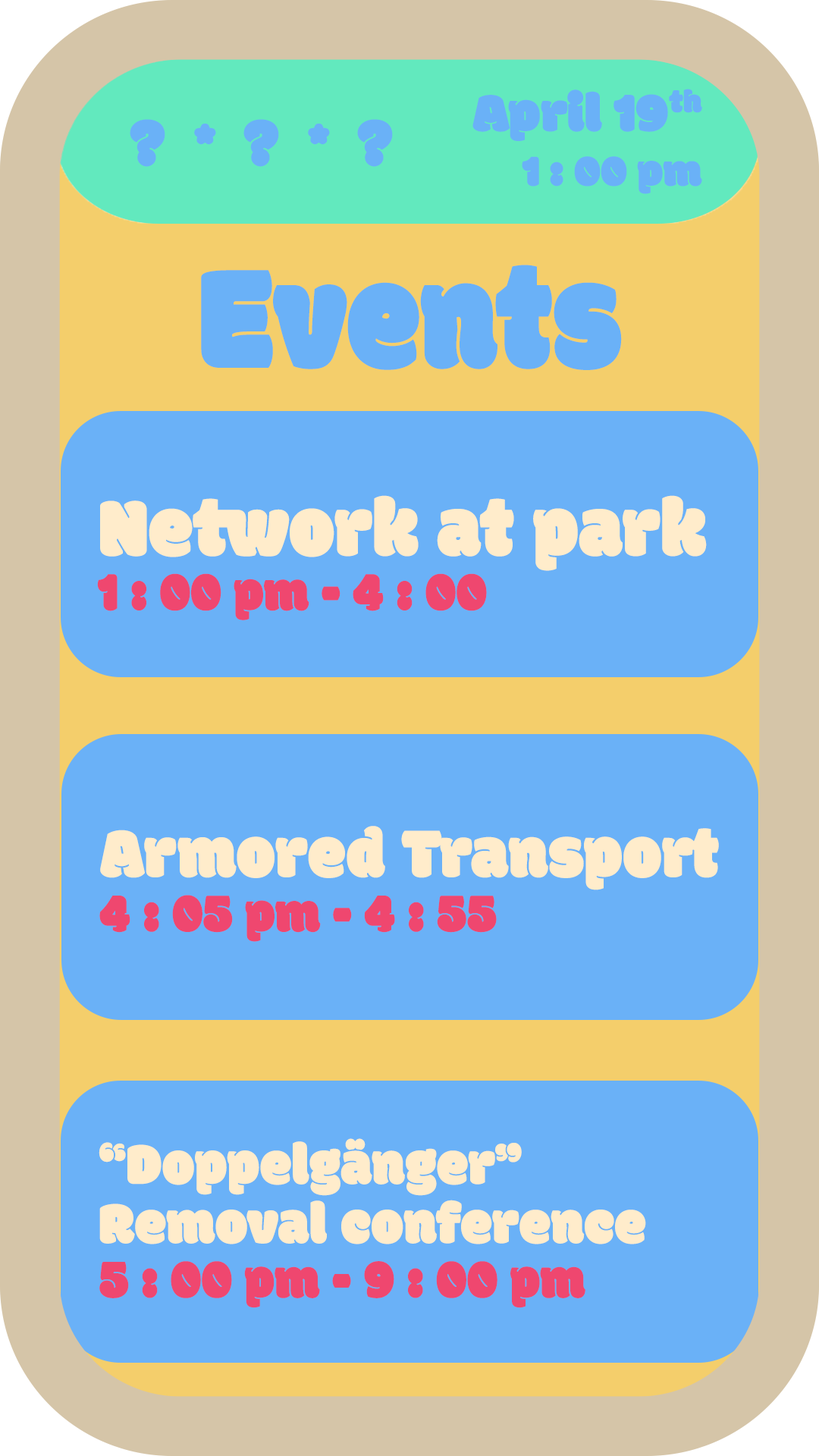
<style>
.page{position:relative;width:819px;height:1456px;background:#6ab1f7}
.page>*{position:absolute;margin:0}
.t1{font:154.5px "Modak";letter-spacing:0.005em;color:#6ab1f7;scale:0.86 1}
.t2{font:56.4px "Modak";letter-spacing:0.005em;color:#ef476f;scale:0.94 1}
.t3{font:85.6px "Modak";letter-spacing:0.005em;color:#ffeccb;scale:0.94 1}
.t4{font:73.3px "Modak";letter-spacing:0.005em;color:#ffeccb;scale:0.94 1}
.t5{font:61.1px "Modak";letter-spacing:0.005em;color:#ffeccb;scale:0.94 1}
</style>
<div class="page">
<p class="t1" style="left:201px;top:265px;width:421px;height:105px">Events</p>
<p class="t2" style="left:97px;top:495px;width:610px;height:125px"><span class="t3">Network at park<br></span>1 : 00 pm - 4 : 00</p>
<p class="t2" style="left:99px;top:826px;width:620px;height:116px"><span class="t4">Armored Transport<br></span>4 : 05 pm - 4 : 55</p>
<p class="t5" style="left:99px;top:1138px;width:547px;height:170px">“Doppelgänger” Removal conference<br><span class="t2">5 : 00 pm - 9 : 00 pm</span></p>
</div>
